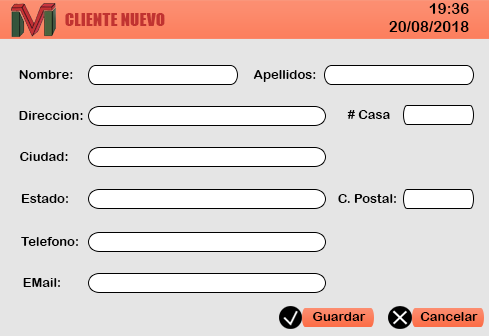
<style>
.page{position:relative;width:489px;height:336px;background:#e5e5e5}
.page>*{position:absolute;margin:0}
.t1{font:14.7px "ArialRoundedMTBold";color:#000000;scale:1.03 1}
.t2{font:17.3px "Impact";color:#c13331}
.t3{font:13px "ArialRoundedMTBold";color:#000000}
</style>
<div class="page">
<p class="t1" style="left:429px;top:3px;width:40px;height:11px">19:36</p>
<p class="t2" style="left:65px;top:13px;width:100px;height:13px">CLIENTE NUEVO</p>
<p class="t1" style="left:389px;top:21px;width:80px;height:11px">20/08/2018</p>
<p class="t3" style="left:19px;top:70px;width:54px;height:9px">Nombre:</p>
<p class="t3" style="left:253px;top:70px;width:63px;height:12px">Apellidos:</p>
<p class="t3" style="left:19px;top:111px;width:64px;height:9px">Direccion:</p>
<p class="t3" style="left:347px;top:110px;width:43px;height:9px"># Casa</p>
<p class="t3" style="left:20px;top:152px;width:48px;height:9px">Ciudad:</p>
<p class="t3" style="left:21px;top:194px;width:47px;height:9px">Estado:</p>
<p class="t3" style="left:338px;top:194px;width:58px;height:9px">C. Postal:</p>
<p class="t3" style="left:21px;top:237px;width:57px;height:9px">Telefono:</p>
<p class="t3" style="left:23px;top:278px;width:37px;height:9px">EMail:</p>
<p class="t3" style="left:313px;top:312px;width:53px;height:9px">Guardar</p>
<p class="t3" style="left:420px;top:312px;width:58px;height:9px">Cancelar</p>
</div>
